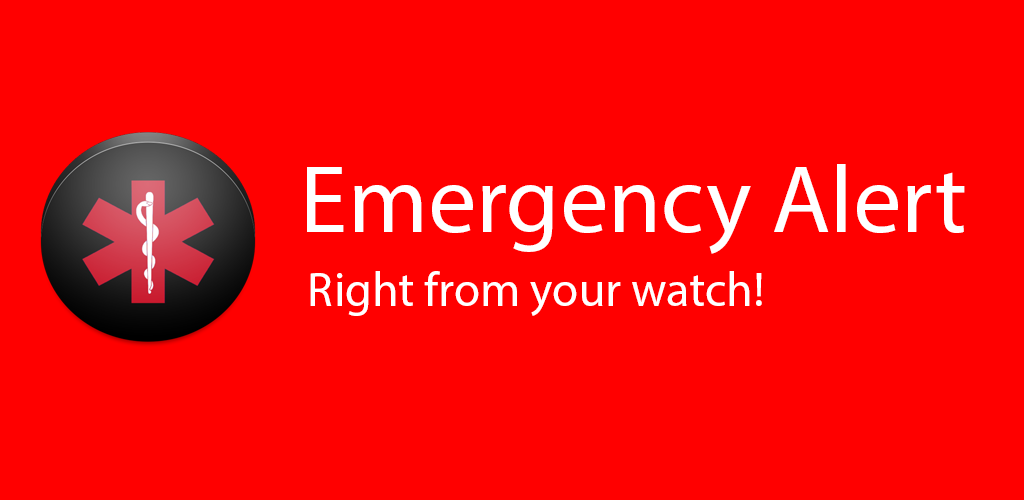
<style>
.page{position:relative;width:1024px;height:500px;background:#ff0000}
.page>*{position:absolute;margin:0}
.t1{font:96px "MyriadPro-Regular";color:#ffffff}
.t2{font:48px "MyriadPro-Regular";color:#ffffff}
</style>
<div class="page">
<p class="t1" style="left:307px;top:164px;width:658px;height:90px">Emergency Alert</p>
<p class="t2" style="left:310px;top:271px;width:452px;height:45px">Right from your watch!</p>
</div>
